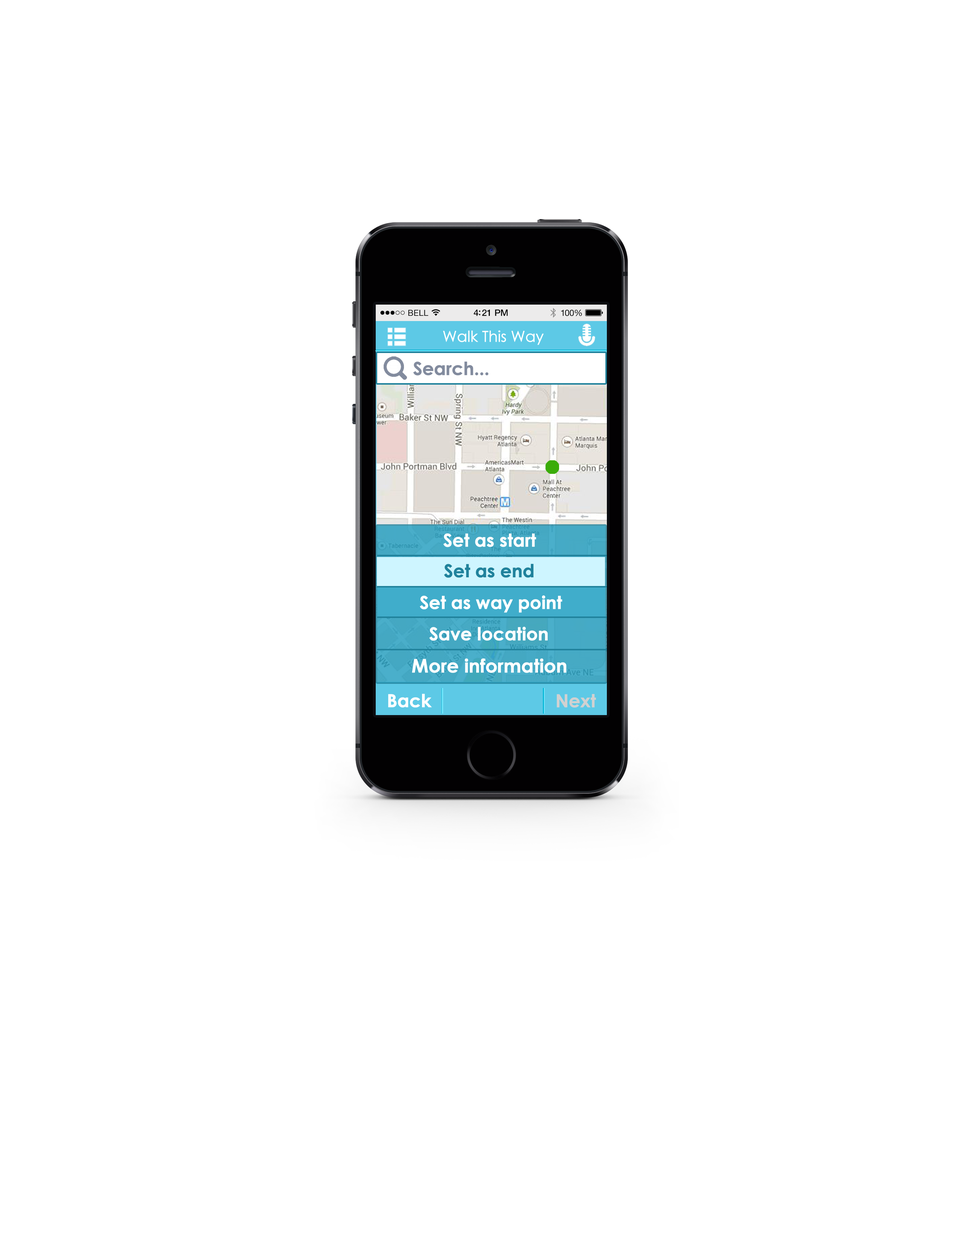
<style>
.page{position:relative;width:960px;height:1242px;background:#ffffff}
.page>*{position:absolute;margin:0}
.t1{font:15px "CenturyGothic";letter-spacing:-0.025em;color:#ffffff;font-weight:bold}
.t2{font:18.1px "CenturyGothic-Bold";letter-spacing:-0.025em;color:#828b9e;font-weight:bold}
.t3{font:18px "CenturyGothic-Bold";letter-spacing:-0.025em;color:#ffffff;font-weight:bold}
.t4{font:18px "CenturyGothic-Bold";letter-spacing:-0.025em;color:#20829c;font-weight:bold}
.t5{font:18.8px "CenturyGothic-Bold";letter-spacing:-0.025em;color:#ffffff;font-weight:bold}
.t6{font:18.1px "CenturyGothic-Bold";letter-spacing:-0.025em;color:#ffffff;font-weight:bold}
.t7{font:18.1px "CenturyGothic-Bold";letter-spacing:-0.025em;color:#d1d1d1;font-weight:bold}
</style>
<div class="page">
<p class="t1" style="left:443px;top:330px;width:101px;height:15px">Walk This Way</p>
<p class="t2" style="left:413px;top:361px;width:76px;height:15px">Search...</p>
<p class="t3" style="left:443px;top:533px;width:93px;height:14px">Set as start</p>
<p class="t4" style="left:444px;top:564px;width:89px;height:14px">Set as end</p>
<p class="t3" style="left:420px;top:596px;width:142px;height:17px">Set as way point</p>
<p class="t3" style="left:429px;top:627px;width:119px;height:14px">Save location</p>
<p class="t5" style="left:412px;top:658px;width:155px;height:15px">More information</p>
<p class="t6" style="left:388px;top:694px;width:44px;height:14px">Back</p>
<p class="t7" style="left:557px;top:694px;width:39px;height:14px">Next</p>
</div>
